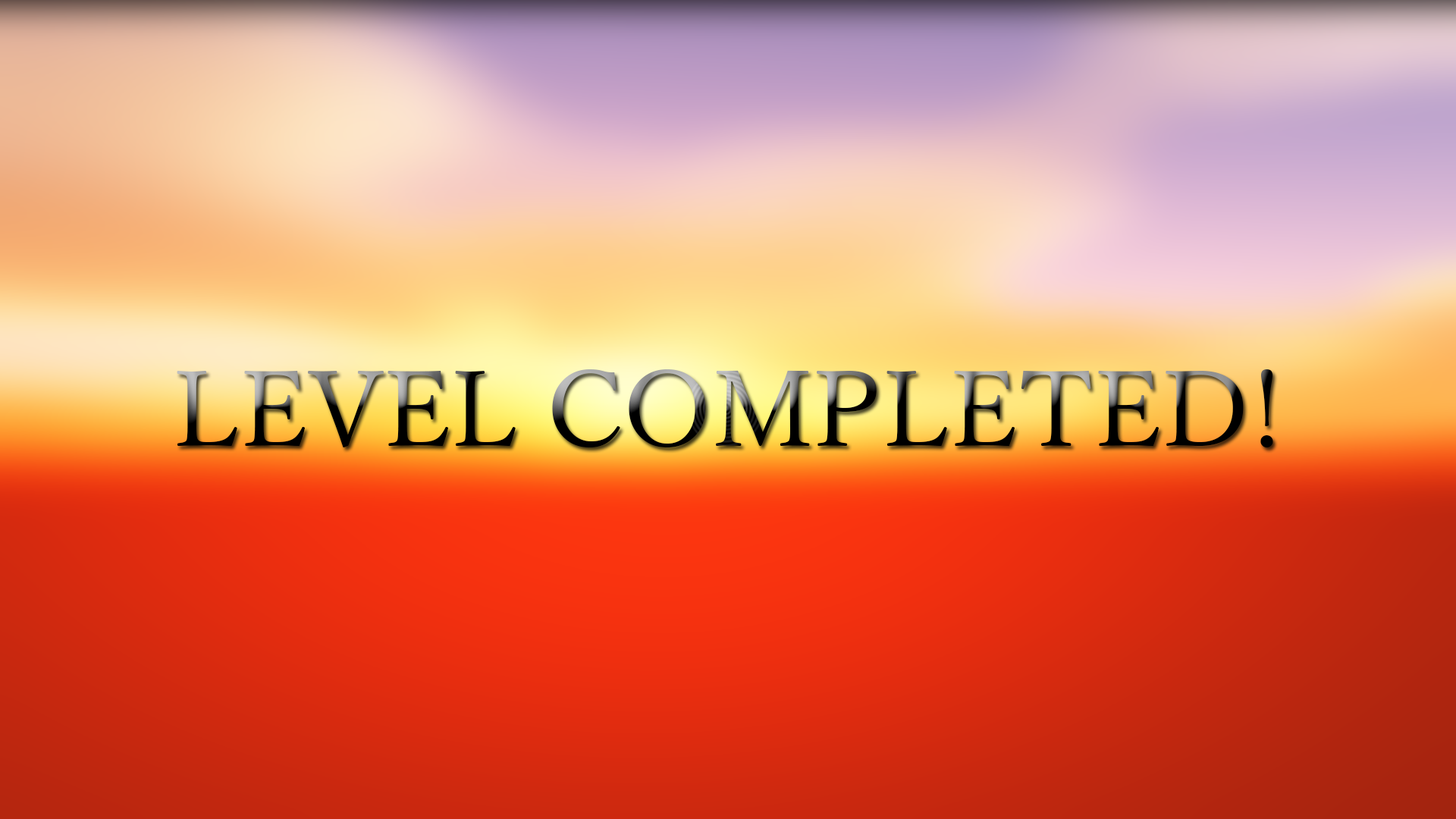
<style>
.page{position:relative;width:1456px;height:819px}
.page>*{position:absolute;margin:0}
.t1{font:105.4px "YuMincho-Regular"}
.t2{font:109.2px "YuMincho-Regular"}
</style>
<div class="page">
<p class="t1" style="left:177px;top:369px;width:1096px;height:78px"><span class="t2"><br><br></span>LEVEL COMPLETED!</p>
</div>
